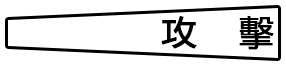
<style>
.page{position:relative;width:286px;height:66px;background:#ffffff}
.page>*{position:absolute;margin:0}
.t1{font:35px "MicrosoftYaHei";letter-spacing:0.06em;color:#000000;font-weight:bold}
</style>
<div class="page">
<p class="t1" style="left:161px;top:16px;width:113px;height:34px">攻　擊</p>
</div>
